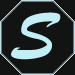
<style>
.page{position:relative;width:75px;height:75px;background:#121414}
.page>*{position:absolute;margin:0}
.t1{font:72px "STXingkai";letter-spacing:0.01em;color:#c3eef6}
</style>
<div class="page">
<p class="t1" style="left:11px;top:12px;width:50px;height:48px">S</p>
</div>
